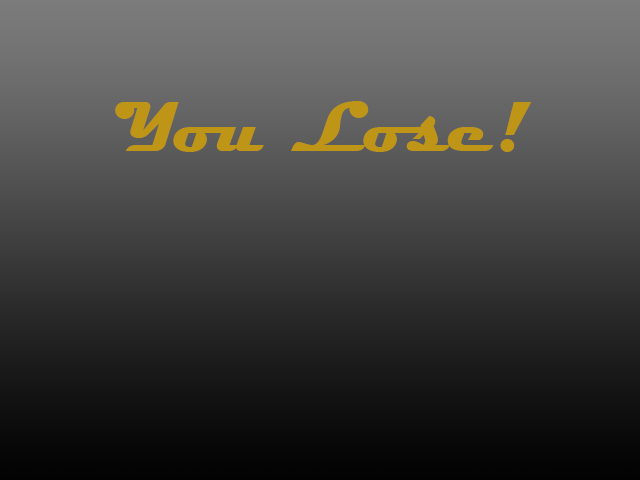
<style>
.page{position:relative;width:640px;height:480px}
.page>*{position:absolute;margin:0}
.t1{font:72px "Magneto-Bold";color:#c09618}
</style>
<div class="page">
<p class="t1" style="left:115px;top:101px;width:417px;height:51px">You Lose!</p>
</div>
